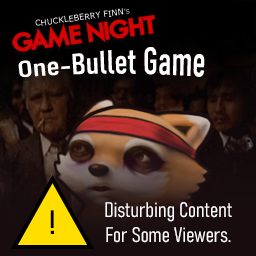
<style>
.page{position:relative;width:256px;height:256px}
.page>*{position:absolute;margin:0}
.t1{font:8.2px "Verdana";color:#ffffff}
.t2{font:8.2px "Verdana";color:#ababab}
.t3{font:32.9px "Bahnschrift-Condensed";color:#ffffff}
.t4{font:20.8px/25px "Bahnschrift-LightCondensed";color:#ffffff}
.t5{font:33.5px "Bahnschrift-Condensed";color:#000000}
</style>
<div class="page">
<p class="t1" style="left:35px;top:8px;width:95px;height:18px;rotate:-7deg">CHUCKLEBERRY FINN<span class="t2">’s</span></p>
<p class="t3" style="left:18px;top:47px;width:187px;height:30px;rotate:-2deg">One-Bullet Game</p>
<p class="t4" style="left:105px;top:202px;width:127px;height:41px;text-align:center">Disturbing Content <br>For Some Viewers.</p>
<p class="t5" style="left:50px;top:210px;width:4px;height:24px">!</p>
</div>
